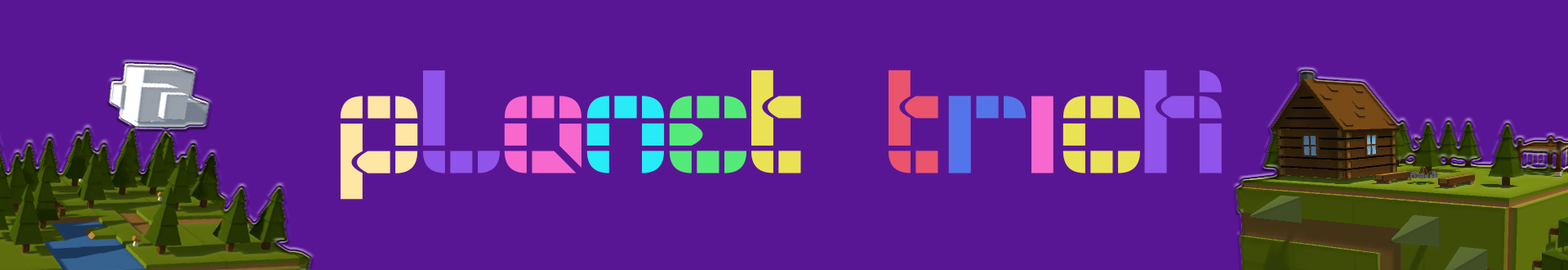
<style>
.page{position:relative;width:1568px;height:270px;background:#591694}
.page>*{position:absolute;margin:0}
.t1{font:155.9px "BUIS";color:#ffe6a4}
.t2{font:155.9px "BUIS";color:#9054ea}
.t3{font:155.9px "BUIS";color:#f668ce}
.t4{font:155.9px "BUIS";color:#27ebf7}
.t5{font:155.9px "BUIS";color:#54ea79}
.t6{font:155.9px "BUIS";color:#eae254}
.t7{font:155.9px "BUIS";color:#ea546d}
.t8{font:155.9px "BUIS";color:#5475ea}
</style>
<div class="page">
<p class="t1" style="left:341px;top:69px;width:881px;height:130px">P<span class="t2">L</span><span class="t3">A</span><span class="t4">N</span><span class="t5">E</span><span class="t6">T </span><span class="t7">T</span><span class="t8">R</span><span class="t3">I</span><span class="t6">C</span><span class="t2">K</span></p>
</div>
